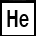
<style>
.page{position:relative;width:36px;height:36px;background:#ffffff}
.page>*{position:absolute;margin:0}
.t1{font:25px "FranklinGothic-Medium";color:#000000;scale:0.8 1}
</style>
<div class="page">
<p class="t1" style="left:7px;top:9px;width:22px;height:17px">He</p>
</div>
